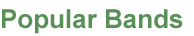
<style>
.page{position:relative;width:194px;height:36px;background:#ffffff}
.page>*{position:absolute;margin:0}
.t1{font:26px "Arial-BoldMT";color:#599057}
</style>
<div class="page">
<p class="t1" style="left:2px;top:9px;width:181px;height:25px">Popular Bands</p>
</div>
